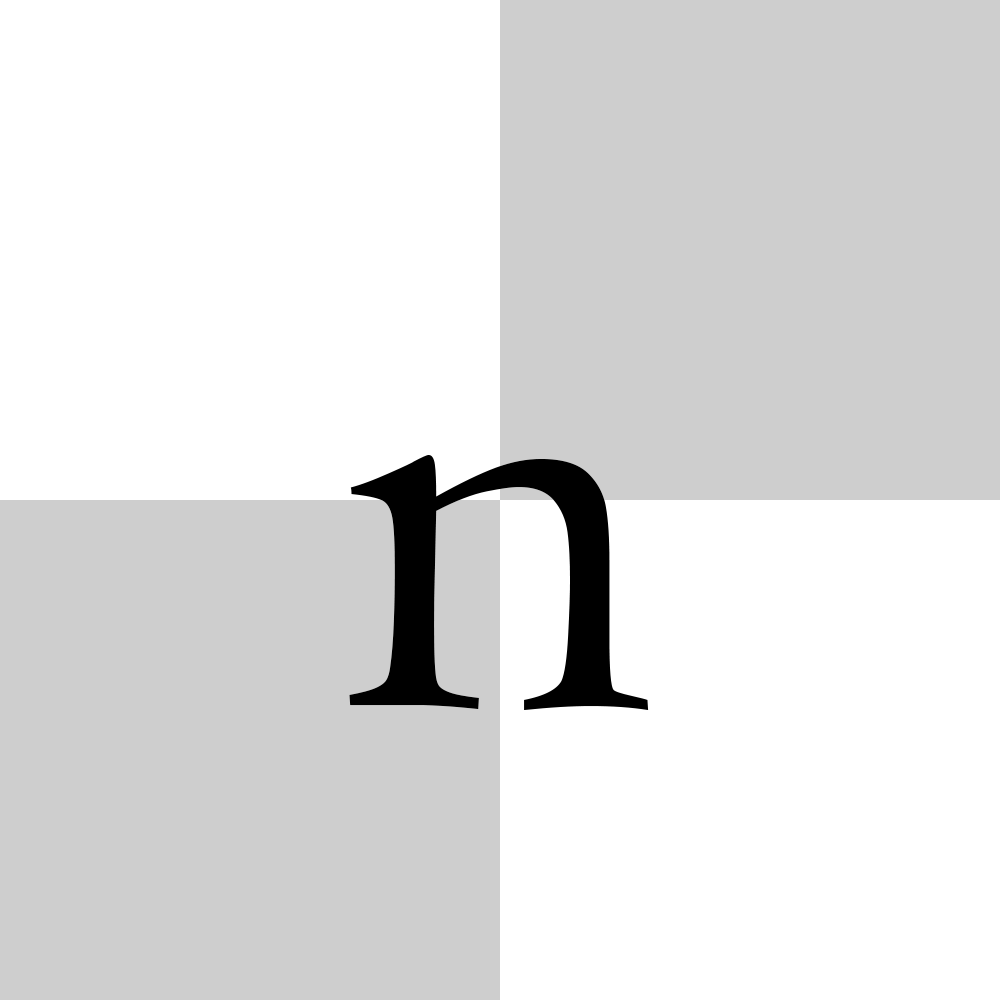
<style>
.page{position:relative;width:1000px;height:1000px;background:#cecece}
.page>*{position:absolute;margin:0}
.t1{font:677.3px "Centaur";color:#000000}
</style>
<div class="page">
<p class="t1" style="left:349px;top:455px;width:300px;height:255px">n</p>
</div>
